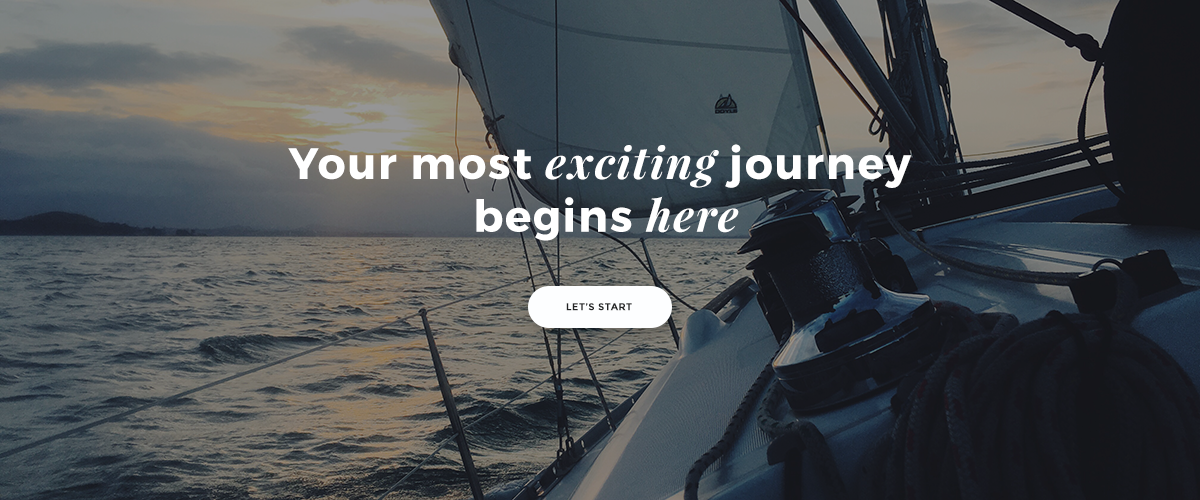
<style>
.page{position:relative;width:1200px;height:500px}
.page>*{position:absolute;margin:0}
.t1{font:44px "Montserrat-Bold";letter-spacing:0.04em;color:#ffffff}
.t2{font:44px "PlayfairDisplay-BoldItalic";letter-spacing:0.04em;color:#ffffff}
.t3{font:10px "Montserrat-Bold";letter-spacing:0.04em;color:#242526;text-transform:uppercase}
</style>
<div class="page">
<p class="t1" style="left:288px;top:144px;width:624px;height:97px;text-align:center">Your most <span class="t2">exciting</span> journey <br>begins <span class="t2">here</span></p>
<p class="t3" style="left:566px;top:303px;width:66px;height:8px">Let’s start</p>
</div>
